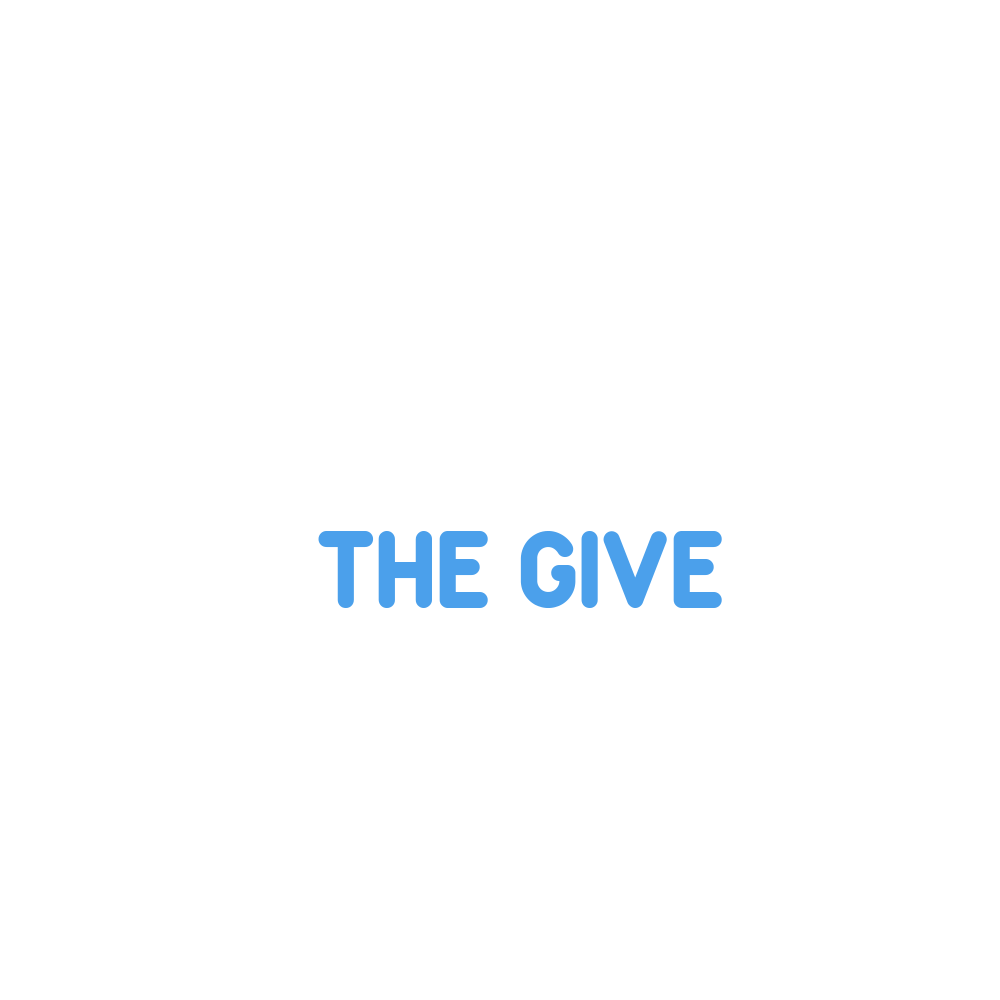
<style>
.page{position:relative;width:1000px;height:1000px;background:#ffffff}
.page>*{position:absolute;margin:0}
.t1{font:120px "zArista";color:#4ba0eb}
</style>
<div class="page">
<p class="t1" style="left:318px;top:531px;width:404px;height:77px">THE GIVE</p>
</div>
